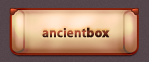
<style>
.page{position:relative;width:149px;height:62px}
.page>*{position:absolute;margin:0}
.t1{font:13px "MyriadPro-Semibold";font-weight:bold}
.t2{font:13px "MyriadPro-Bold";font-weight:bold}
</style>
<div class="page">
<p class="t1" style="left:42px;top:27px;width:68px;height:11px">ancient<span class="t2">box</span></p>
</div>
